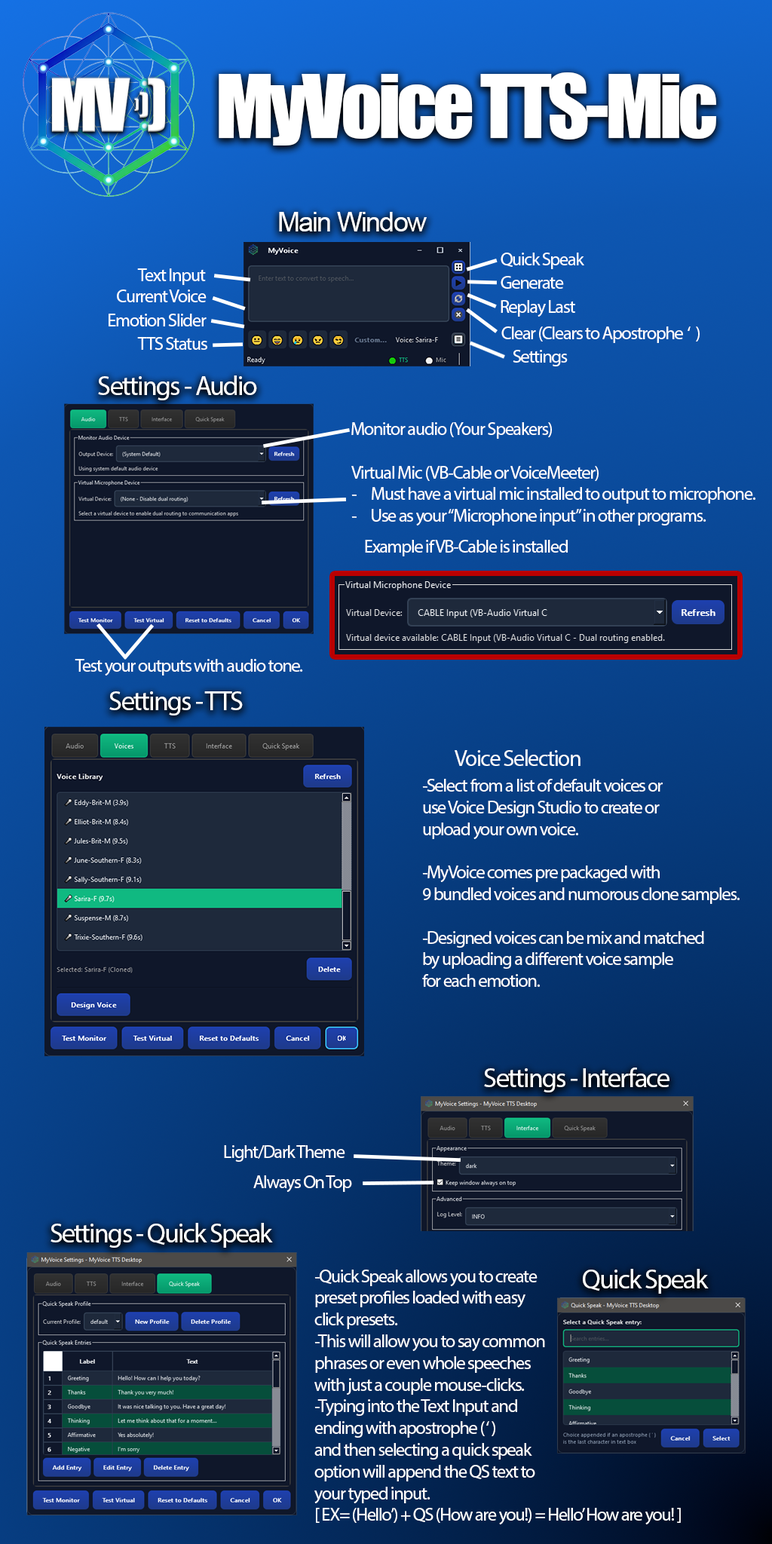
<style>
.page{position:relative;width:772px;height:1544px}
.page>*{position:absolute;margin:0}
.t1{font:81.4px "Impact";letter-spacing:-0.05em;color:#ffffff}
.t2{font:27.1px "ArialMT";letter-spacing:-0.05em;color:#ffffff}
.t3{font:18.1px "MyriadPro-Regular";letter-spacing:-0.05em;color:#ffffff}
.t4{font:27.1px "MyriadPro-Regular";letter-spacing:-0.05em;color:#ffffff}
.t5{font:22.6px "MyriadPro-Regular";letter-spacing:-0.05em;color:#ffffff}
</style>
<div class="page">
<p class="t1" style="left:219px;top:72px;width:497px;height:74px">MyVoice TTS-Mic</p>
<p class="t2" style="left:279px;top:212px;width:148px;height:19px">Main Window</p>
<p class="t3" style="left:501px;top:253px;width:83px;height:16px">Quick Speak</p>
<p class="t3" style="left:137px;top:268px;width:69px;height:17px">Text Input</p>
<p class="t3" style="left:501px;top:276px;width:63px;height:13px">Generate</p>
<p class="t3" style="left:117px;top:290px;width:90px;height:12px">Current Voice</p>
<p class="t3" style="left:501px;top:300px;width:74px;height:17px">Replay Last</p>
<p class="t3" style="left:109px;top:314px;width:98px;height:13px">Emotion Slider</p>
<p class="t3" style="left:501px;top:327px;width:199px;height:16px">Clear (Clears to Apostrophe  ‘  )</p>
<p class="t3" style="left:137px;top:337px;width:70px;height:13px">TTS Status</p>
<p class="t3" style="left:513px;top:350px;width:55px;height:16px">Settings</p>
<p class="t4" style="left:98px;top:376px;width:159px;height:24px">Settings - Audio</p>
<p class="t3" style="left:351px;top:422px;width:201px;height:17px">Monitor audio (Your Speakers)</p>
<p class="t3" style="left:351px;top:466px;width:405px;height:60px">Virtual Mic (VB-Cable or VoiceMeeter)<br>Must have a virtual mic installed to output to microphone. <br>Use as your “Microphone input” in other programs.</p>
<p class="t3" style="left:365px;top:540px;width:203px;height:16px">Example if VB-Cable is installed</p>
<p class="t3" style="left:75px;top:659px;width:228px;height:17px">Test your outputs with audio tone.</p>
<p class="t4" style="left:109px;top:691px;width:134px;height:25px">Settings - TTS</p>
<p class="t5" style="left:455px;top:750px;width:126px;height:16px">Voice Selection</p>
<p class="t3" style="left:422px;top:779px;width:318px;height:208px">-Select from a list of default voices or <br>use Voice Design Studio to create or<br>upload your own voice.<br><br>-MyVoice comes pre packaged with<br>9 bundled voices and numorous clone samples.<br><br>-Designed voices can be mix and matched<br>by uploading a different voice sample<br>for each emotion.</p>
<p class="t4" style="left:484px;top:1068px;width:186px;height:25px">Settings - Interface</p>
<p class="t3" style="left:224px;top:1145px;width:121px;height:17px">Light/Dark Theme</p>
<p class="t3" style="left:253px;top:1176px;width:99px;height:16px">Always On Top</p>
<p class="t4" style="left:51px;top:1223px;width:222px;height:25px">Settings - Quick Speak</p>
<p class="t3" style="left:314px;top:1270px;width:367px;height:255px">-Quick Speak allows you to create<br>preset profiles loaded with easy<br>click presets. <br>-This will allow you to say common<br>phrases or even whole speeches<br>with just a couple mouse-clicks.<br>-Typing into the Text Input and<br>ending with apostrophe ( ‘ ) <br>and then selecting a quick speak<br>option will append the QS text to <br>your typed input.<br>[ EX= (Hello’) + QS (How are you!) = Hello’ How are you! ]</p>
<p class="t4" style="left:583px;top:1269px;width:126px;height:25px">Quick Speak</p>
</div>
